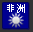
<style>
.page{position:relative;width:33px;height:32px;background:#000090}
.page>*{position:absolute;margin:0}
.t1{font:10.4px "SimSun";color:#ffffff}
</style>
<div class="page">
<p class="t1" style="left:7px;top:4px;width:18px;height:9px">非洲</p>
</div>
